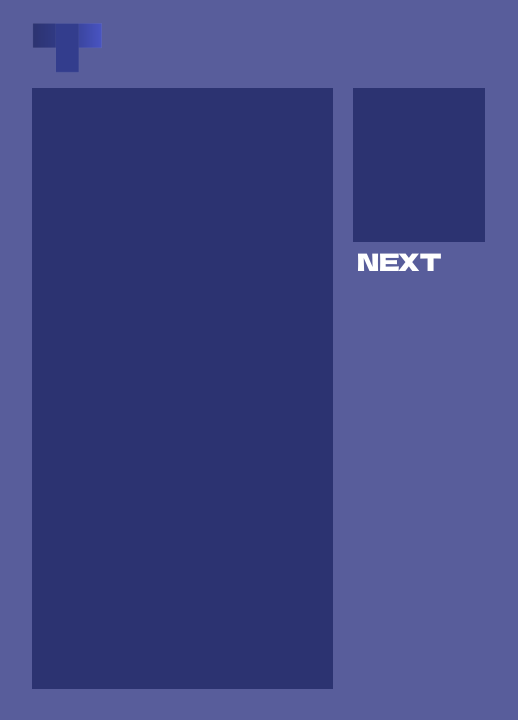
<style>
.page{position:relative;width:518px;height:720px;background:#2c3371}
.page>*{position:absolute;margin:0}
.t1{font:24px "DelaGothicOne-Regular";color:#ffffff}
</style>
<div class="page">
<p class="t1" style="left:357px;top:253px;width:84px;height:18px">NEXT</p>
</div>
